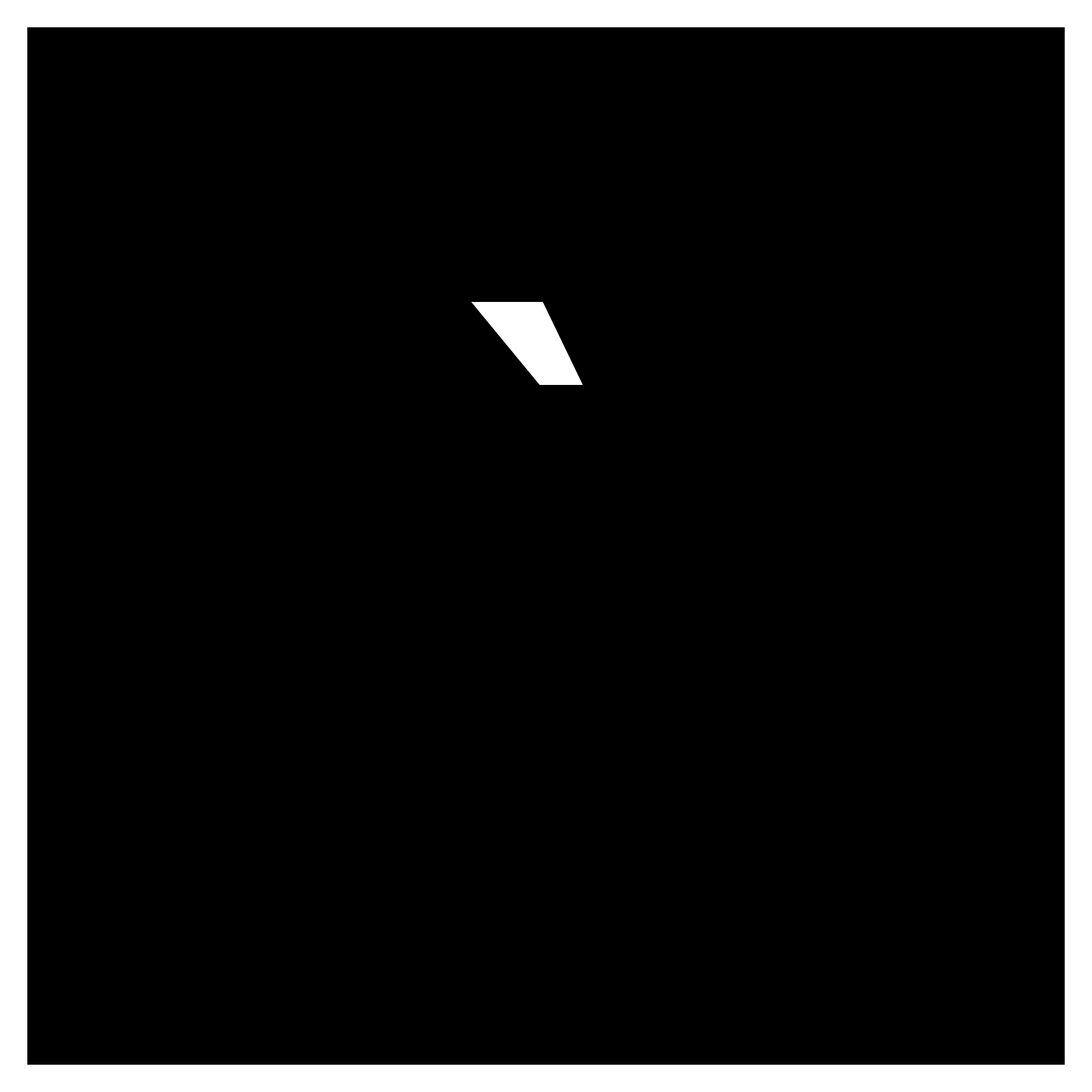
<style>
.page{position:relative;width:1092px;height:1092px;background:#000000}
.page>*{position:absolute;margin:0}
.t1{font:606.7px "ArialMT";color:#ffffff}
</style>
<div class="page">
<p class="t1" style="left:471px;top:302px;width:112px;height:83px">`</p>
</div>
